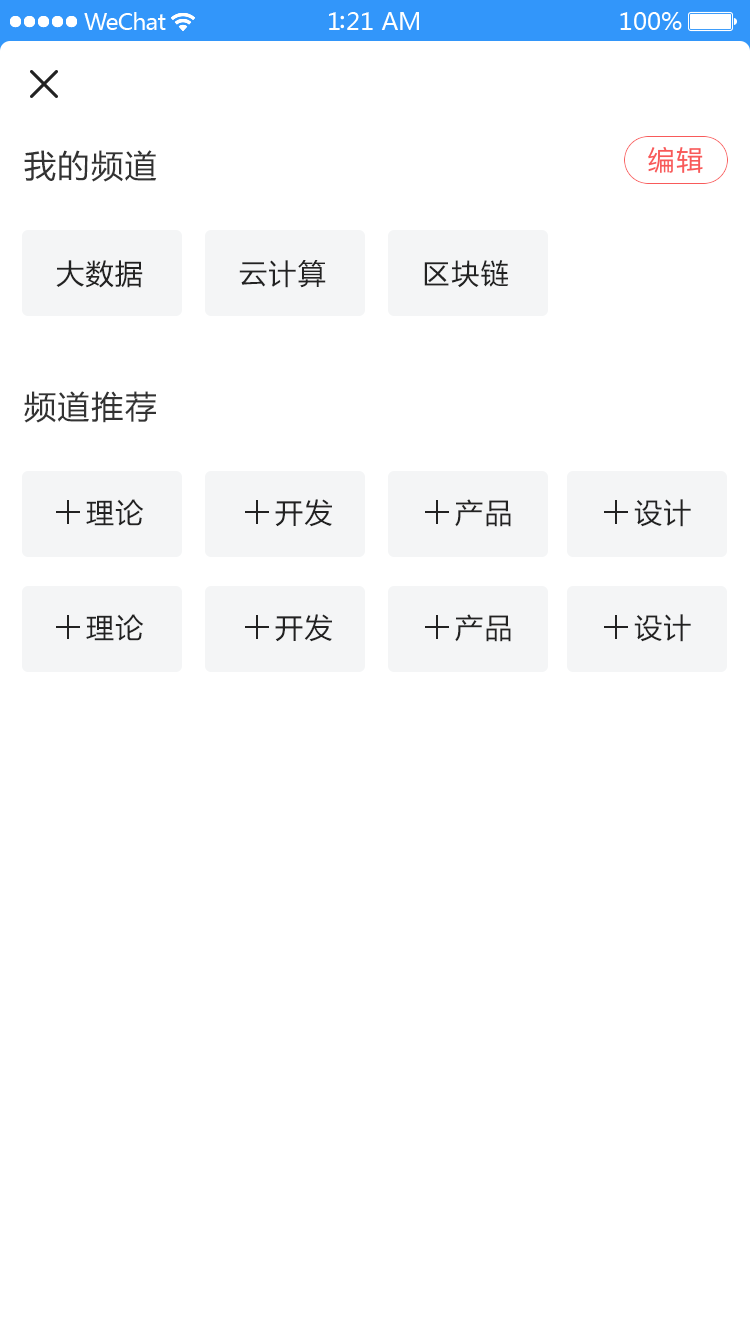
<style>
.page{position:relative;width:750px;height:1334px;background:#ffffff}
.page>*{position:absolute;margin:0}
.t1{font:32px "MicrosoftYaHei";letter-spacing:0.05em;color:#333333}
.t2{font:28px "MicrosoftYaHei";letter-spacing:0.05em;color:#222222}
</style>
<div class="page">
<p class="t1" style="left:24px;top:150px;width:133px;height:32px">我的频道</p>
<p class="t2" style="left:56px;top:260px;width:87px;height:28px">大数据</p>
<p class="t2" style="left:239px;top:260px;width:87px;height:28px">云计算</p>
<p class="t2" style="left:424px;top:260px;width:85px;height:28px">区块链</p>
<p class="t1" style="left:24px;top:391px;width:132px;height:32px">频道推荐</p>
<p class="t2" style="left:86px;top:499px;width:58px;height:27px">理论</p>
<p class="t2" style="left:275px;top:499px;width:57px;height:28px">开发</p>
<p class="t2" style="left:455px;top:499px;width:56px;height:28px">产品</p>
<p class="t2" style="left:634px;top:499px;width:57px;height:28px">设计</p>
<p class="t2" style="left:86px;top:614px;width:58px;height:27px">理论</p>
<p class="t2" style="left:275px;top:614px;width:57px;height:28px">开发</p>
<p class="t2" style="left:455px;top:614px;width:56px;height:28px">产品</p>
<p class="t2" style="left:634px;top:614px;width:57px;height:28px">设计</p>
</div>
